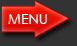
<style>
.page{position:relative;width:77px;height:46px;background:#333333}
.page>*{position:absolute;margin:0}
.t1{font:14px "CenturyGothic";color:#ffffff}
</style>
<div class="page">
<p class="t1" style="left:8px;top:14px;width:39px;height:10px">MENU</p>
</div>
